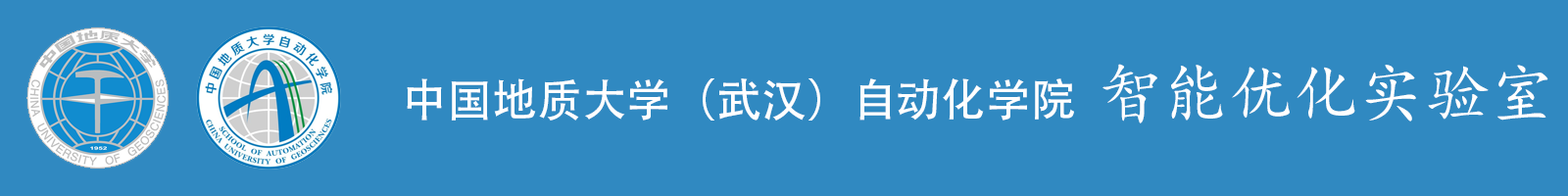
<style>
.page{position:relative;width:1568px;height:196px;background:#3089c1}
.page>*{position:absolute;margin:0}
.t1{font:44.9px "AdobeHeitiStd-Regular";color:#ffffff}
.t2{font:65.3px "KaiTi";color:#ffffff}
</style>
<div class="page">
<p class="t1" style="left:407px;top:64px;width:1141px;height:59px">中国地质大学（武汉）自动化学院  <span class="t2">智能优化实验室</span></p>
</div>
